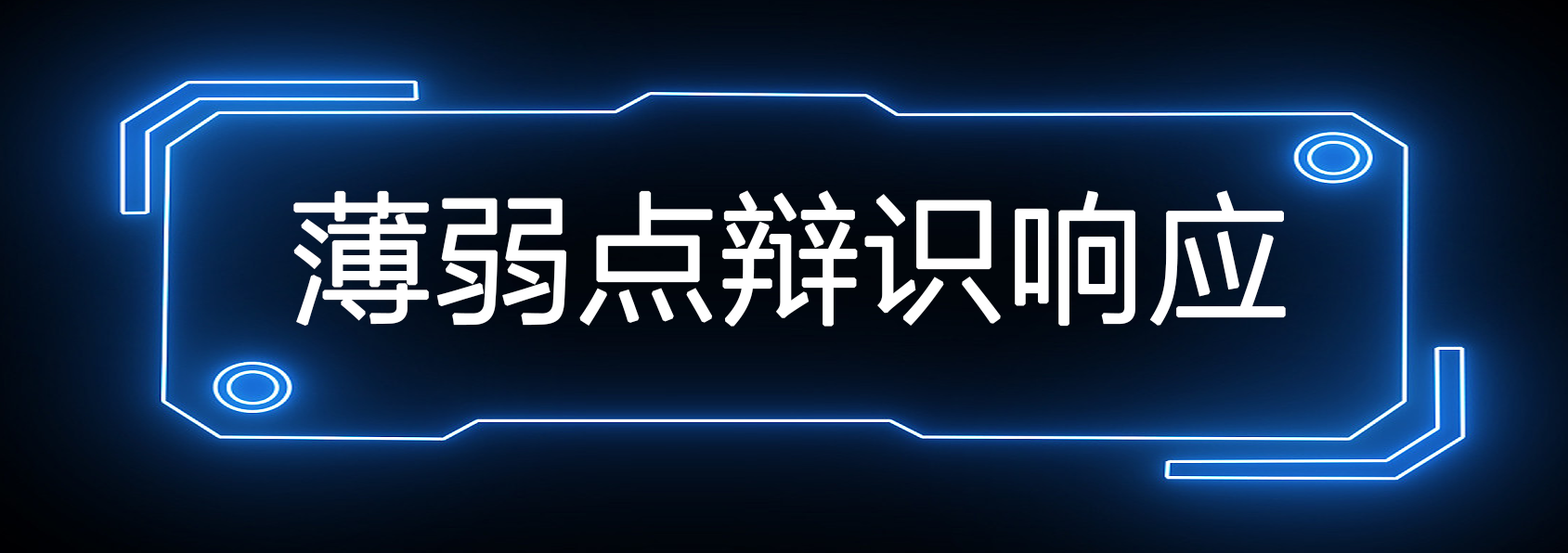
<style>
.page{position:relative;width:1568px;height:553px}
.page>*{position:absolute;margin:0}
.t1{font:139.3px "MicrosoftYaHeiLight";color:#ffffff;font-weight:bold}
</style>
<div class="page">
<p class="t1" style="left:293px;top:190px;width:993px;height:137px">薄弱点辩识响应</p>
</div>
